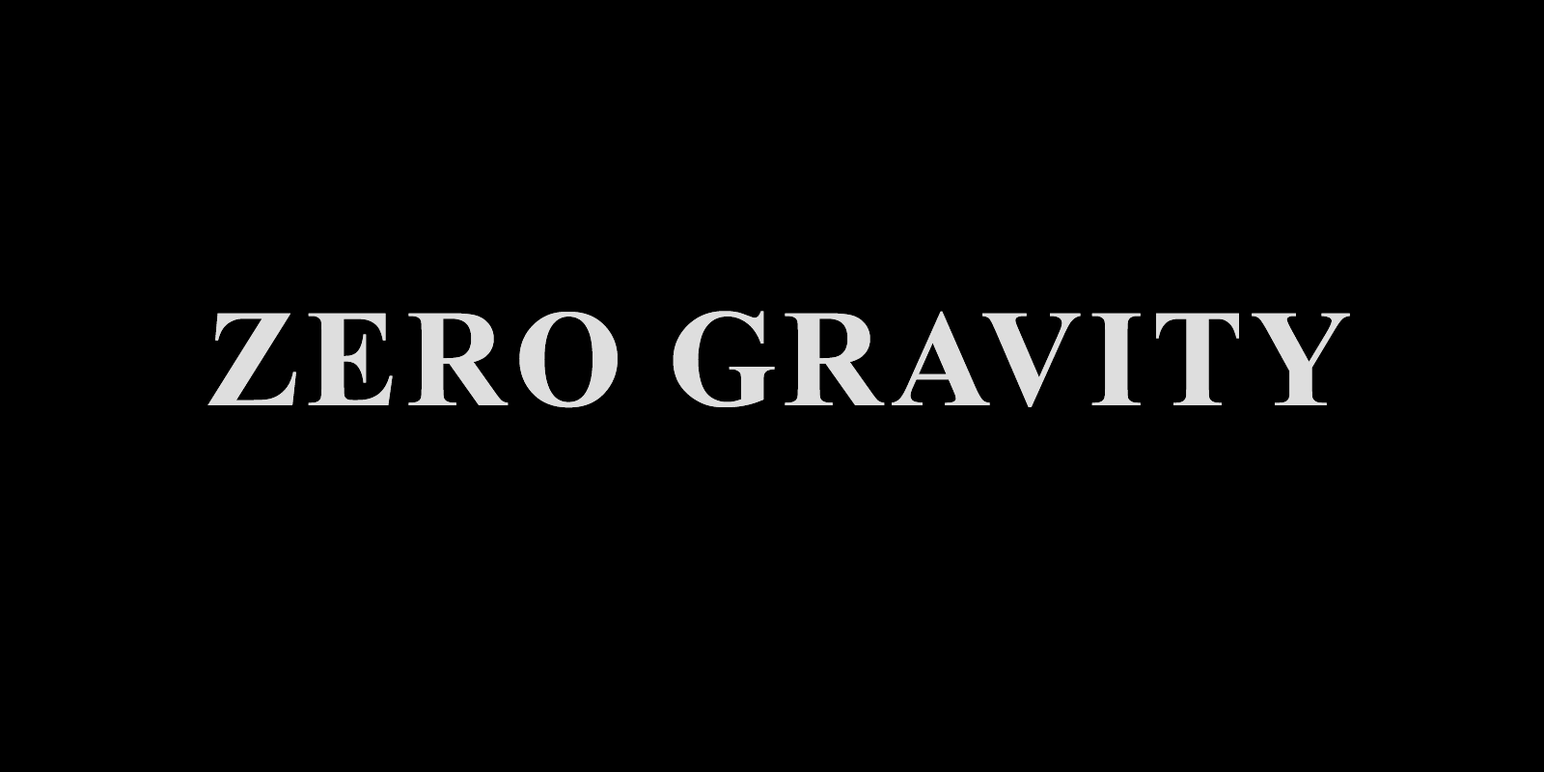
<style>
.page{position:relative;width:1544px;height:772px;background:#000000}
.page>*{position:absolute;margin:0}
.t1{font:138.9px "TimesNewRomanPS-BoldMT";letter-spacing:0.02em;color:#dedede;text-transform:uppercase}
</style>
<div class="page">
<p class="t1" style="left:208px;top:311px;width:1142px;height:97px">zero gravity</p>
<p class="t1" style="left:208px;top:311px;width:1142px;height:97px">zero gravity</p>
</div>
